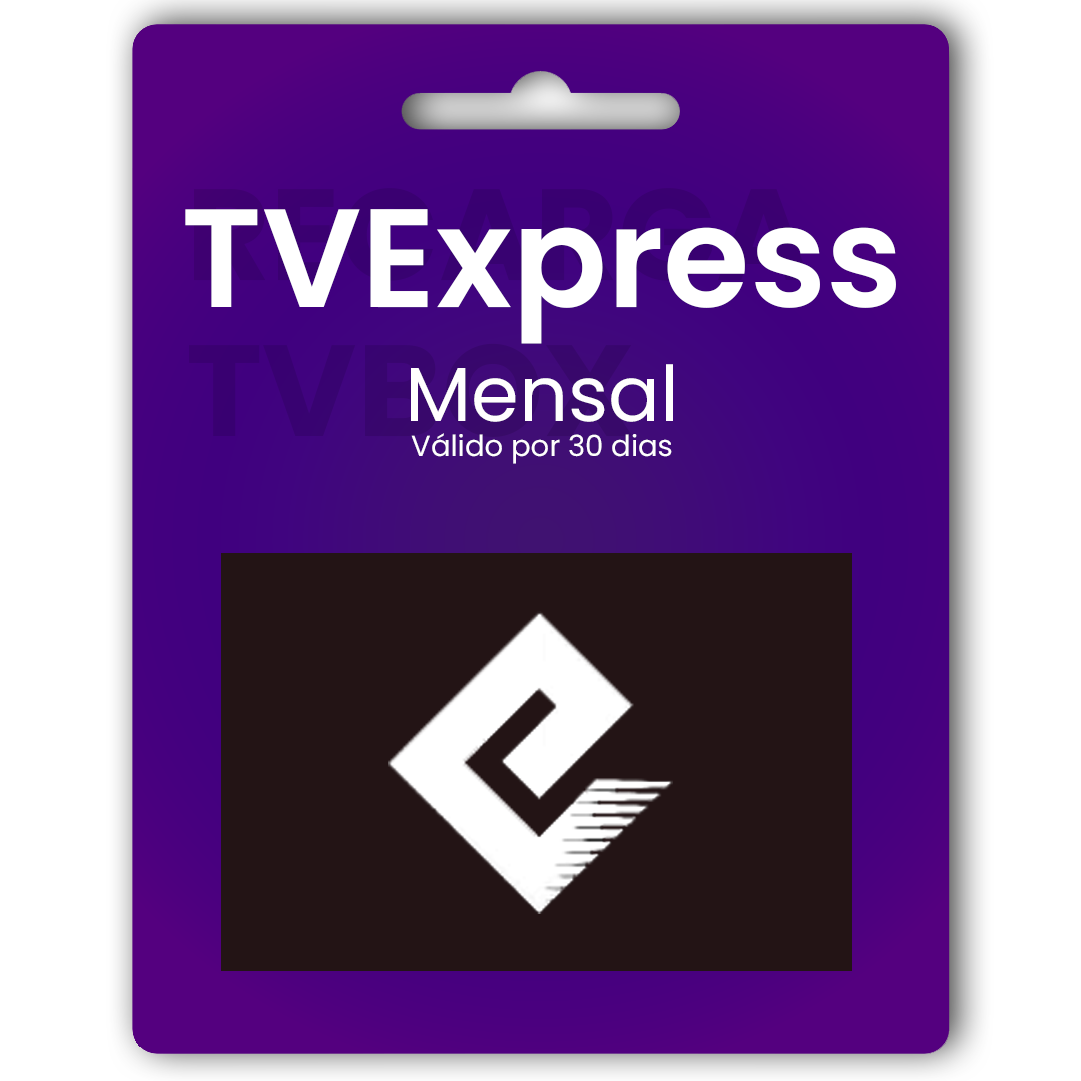
<style>
.page{position:relative;width:1081px;height:1081px;background:#ffffff}
.page>*{position:absolute;margin:0}
.t1{font:139.9px "Poppins-SemiBold";color:#ffffff}
.t2{font:29.1px "Poppins-Regular";color:#fffefe}
.t3{font:76.7px "Poppins-Regular";color:#fffefe}
</style>
<div class="page">
<p class="t1" style="left:185px;top:209px;width:711px;height:135px">TVExpress</p>
<p class="t2" style="left:411px;top:364px;width:262px;height:100px;text-align:center"><span class="t3">Mensal<br></span>Válido por 30 dias</p>
</div>
